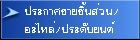
<style>
.page{position:relative;width:140px;height:40px}
.page>*{position:absolute;margin:0}
.t1{font:15.3px/18px "EucrosiaDSE";color:#ffffff;scale:1.12 1}
</style>
<div class="page">
<p class="t1" style="left:25px;top:2px;width:93px;height:31px">»ÃÐ¡ÒÈ¢ÒÂªÔé¹ÊèÇ¹/<br>ÍÐäËÅè/»ÃÐ´ÑºÂ¹µì</p>
</div>
